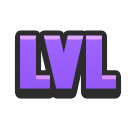
<style>
.page{position:relative;width:128px;height:128px;background:#ffffff}
.page>*{position:absolute;margin:0}
.t1{font:71px "GillSans-UltraBoldCondensed";letter-spacing:-0.1em;color:#995ef9}
.t2{font:71px "GillSans-UltraBoldCondensed";letter-spacing:-0.02em;color:#995ef9}
</style>
<div class="page">
<p class="t1" style="left:20px;top:35px;width:96px;height:54px">L<span class="t2">V</span>L</p>
</div>
